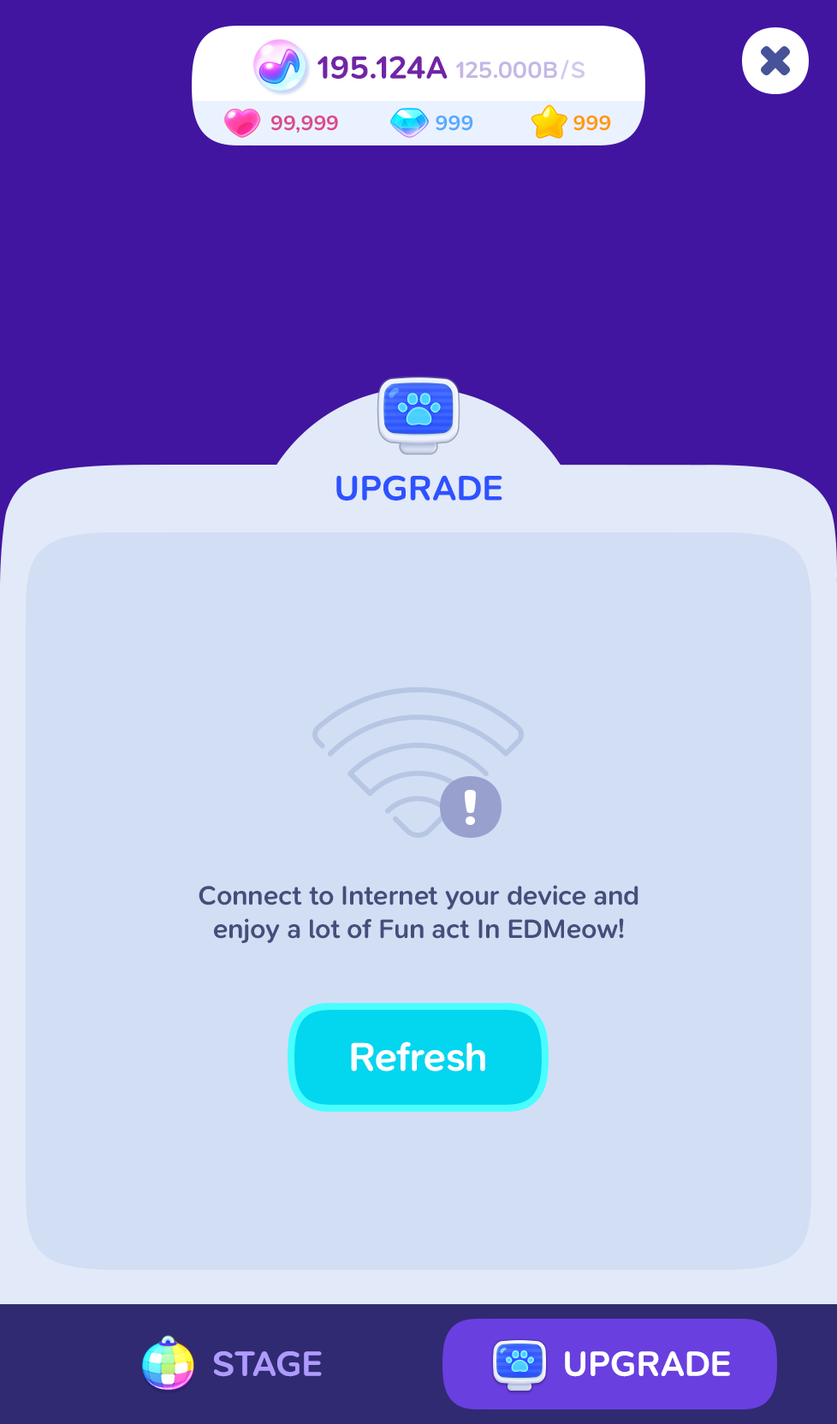
<style>
.page{position:relative;width:837px;height:1424px;background:#d2def4}
.page>*{position:absolute;margin:0}
.t1{font:32.5px "SNPro-SemiBold";letter-spacing:-0.01em;color:#7125a6}
.t2{font:24px "SNPro-SemiBold";letter-spacing:-0.01em;color:#c5b7e5;text-transform:uppercase}
.t3{font:24px "SNPro-SemiBold";letter-spacing:-0.01em;color:#bfb3e5;text-transform:uppercase}
.t4{font:24px "SNPro-SemiBold";letter-spacing:-0.01em;color:#bfb3e5}
.t5{font:21.4px "SNPro-SemiBold";letter-spacing:-0.01em;color:#da4a8e}
.t6{font:21.4px "SNPro-SemiBold";letter-spacing:-0.01em;color:#57a9ff}
.t7{font:21.4px "SNPro-SemiBold";letter-spacing:-0.01em;color:#ff9805}
.t8{font:36px "SNPro-SemiBold";letter-spacing:-0.01em;color:#2d52ff;text-transform:uppercase}
.t9{font:27.4px "SNPro-SemiBold";letter-spacing:-0.01em;color:#454e7b}
.t10{font:41.1px "SNPro-SemiBold";letter-spacing:-0.01em;color:#ffffff}
.t11{font:36px "SNPro-SemiBold";letter-spacing:-0.01em;color:#af9bff;text-transform:uppercase}
.t12{font:36px "SNPro-SemiBold";letter-spacing:-0.01em;color:#ffffff;text-transform:uppercase}
</style>
<div class="page">
<p class="t1" style="left:318px;top:56px;width:130px;height:23px">195.124A</p>
<p class="t2" style="left:456px;top:62px;width:101px;height:17px">125.000B</p>
<p class="t3" style="left:561px;top:60px;width:8px;height:20px">/</p>
<p class="t4" style="left:572px;top:62px;width:13px;height:17px">S</p>
<p class="t5" style="left:271px;top:116px;width:67px;height:18px">99,999</p>
<p class="t6" style="left:436px;top:116px;width:37px;height:15px">999</p>
<p class="t7" style="left:574px;top:116px;width:37px;height:15px">999</p>
<p class="t8" style="left:336px;top:475px;width:166px;height:26px">Upgrade</p>
<p class="t9" style="left:199px;top:885px;width:440px;height:58px;text-align:center">Connect to Internet your device and<br>enjoy a lot of Fun act In EDMeow!</p>
<p class="t10" style="left:351px;top:1042px;width:134px;height:30px">Refresh</p>
<p class="t11" style="left:214px;top:1352px;width:108px;height:25px">Stage</p>
<p class="t12" style="left:565px;top:1352px;width:165px;height:25px">Upgrade</p>
</div>
